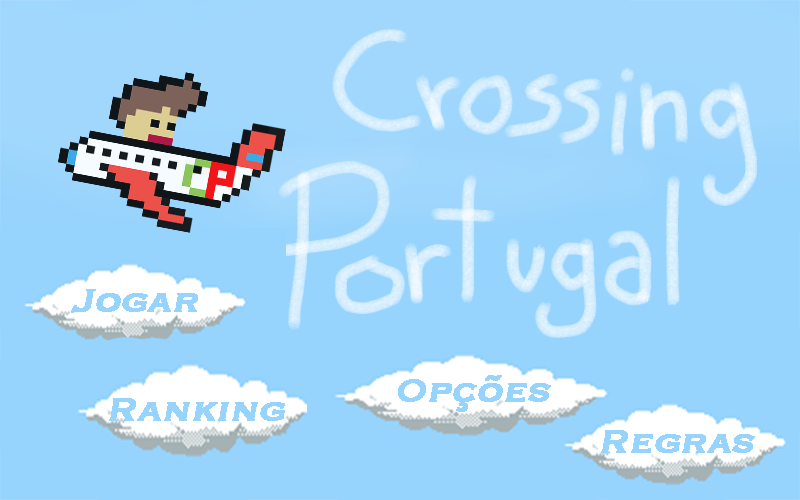
<style>
.page{position:relative;width:800px;height:500px;background:#96d3fd}
.page>*{position:absolute;margin:0}
.t1{font:41.7px "Copperplate";color:#96d3fd;font-weight:bold;font-style:italic}
</style>
<div class="page">
<p class="t1" style="left:71px;top:289px;width:127px;height:24px">Jogar</p>
<p class="t1" style="left:398px;top:375px;width:153px;height:37px">Opções</p>
<p class="t1" style="left:109px;top:398px;width:176px;height:23px">Ranking</p>
<p class="t1" style="left:601px;top:430px;width:154px;height:23px">Regras</p>
</div>
